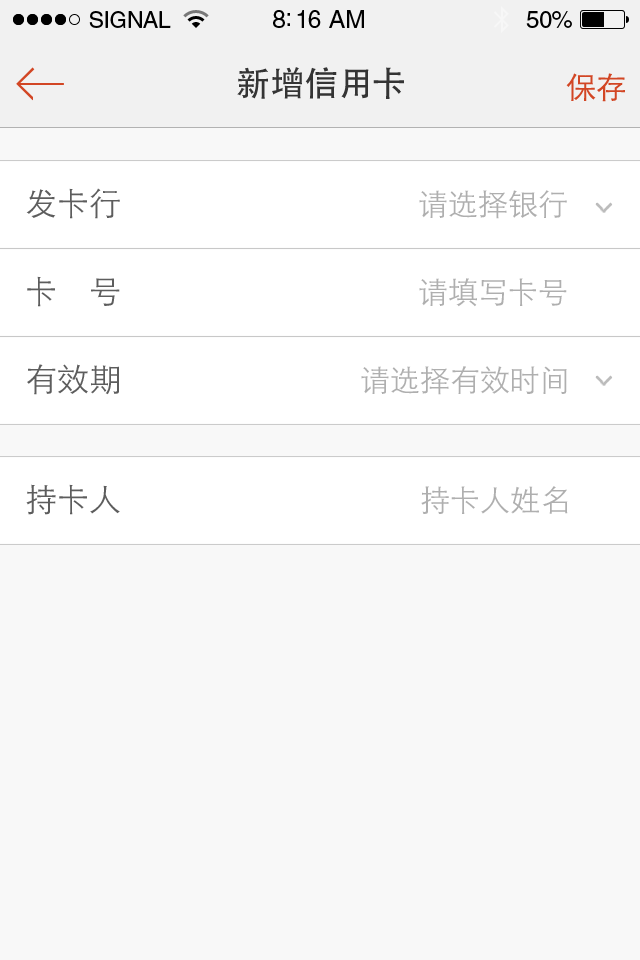
<style>
.page{position:relative;width:640px;height:960px;background:#f8f8f8}
.page>*{position:absolute;margin:0}
.t1{font:34px "STHeitiSC-Medium";color:#343434}
.t2{font:30px "STHeitiSC-Light";color:#d24624}
.t3{font:32px "STHeitiSC-Light";color:#5d5d5d}
.t4{font:30px "STHeitiSC-Light";color:#afafaf}
</style>
<div class="page">
<p class="t1" style="left:237px;top:67px;width:167px;height:32px">新增信用卡</p>
<p class="t2" style="left:566px;top:73px;width:59px;height:29px">保存</p>
<p class="t3" style="left:26px;top:188px;width:94px;height:31px">发卡行</p>
<p class="t4" style="left:419px;top:190px;width:148px;height:29px">请选择银行</p>
<p class="t3" style="left:27px;top:276px;width:93px;height:31px">卡    号</p>
<p class="t4" style="left:419px;top:278px;width:148px;height:29px">请填写卡号</p>
<p class="t3" style="left:27px;top:364px;width:92px;height:31px">有效期</p>
<p class="t4" style="left:361px;top:366px;width:206px;height:29px">请选择有效时间</p>
<p class="t3" style="left:26px;top:484px;width:94px;height:31px">持卡人</p>
<p class="t4" style="left:421px;top:486px;width:147px;height:28px">持卡人姓名</p>
</div>
